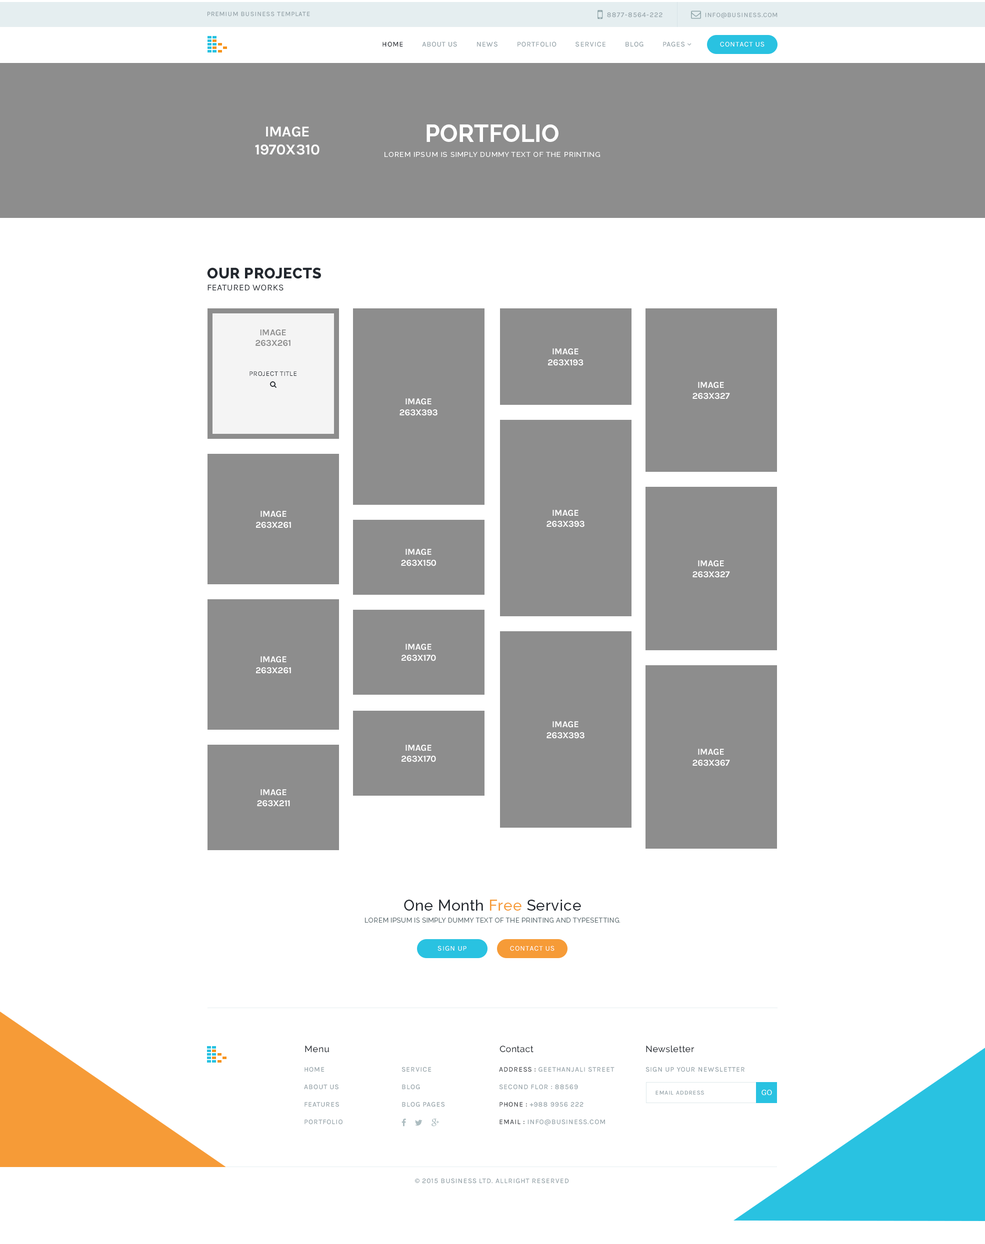
<style>
.page{position:relative;width:985px;height:1244px;background:#ffffff}
.page>*{position:absolute;margin:0}
.t1{font:6.5px "Karla-Regular";letter-spacing:0.075em;color:#93a1a7;text-transform:uppercase}
.t2{font:7px "Karla-Regular";letter-spacing:0.075em;color:#93a1a7;text-transform:uppercase}
.t3{font:7.2px "Karla-Regular";letter-spacing:0.075em;color:#93a1a7;text-transform:uppercase}
.t4{font:7.2px "Karla-Regular";letter-spacing:0.075em;color:#23282f;text-transform:uppercase}
.t5{font:7.2px "Karla-Regular";letter-spacing:0.075em;color:#ffffff;text-transform:uppercase}
.t6{font:7px/15px "Raleway-Regular";letter-spacing:0.075em;color:#ffffff;text-transform:uppercase}
.t7{font:24px/15px "Raleway-Bold";color:#ffffff;text-transform:uppercase}
.t8{font:15px "Karla-Bold";letter-spacing:-0.01em;color:#ffffff;text-transform:uppercase}
.t9{font:9px/12px "Karla-Regular";letter-spacing:0.025em;color:#23282f;text-transform:uppercase}
.t10{font:15px/12px "Raleway-ExtraBold";letter-spacing:0.025em;color:#23282f;text-transform:uppercase}
.t11{font:9px "Karla-Bold";letter-spacing:-0.01em;color:#8d8d8d;text-transform:uppercase}
.t12{font:9px "Karla-Bold";letter-spacing:-0.01em;color:#ffffff;text-transform:uppercase}
.t13{font:7px "Karla-Regular";letter-spacing:0.025em;color:#23282f;text-transform:uppercase}
.t14{font:6.5px/12px "Raleway-Regular";letter-spacing:0.05em;color:#59686c;text-transform:uppercase}
.t15{font:15px/12px "Raleway-Medium";letter-spacing:0.025em;color:#23282f}
.t16{font:15px/12px "Raleway-Medium";letter-spacing:0.025em;color:#f69b37}
.t17{font:9px "Raleway-Medium";letter-spacing:0.025em;color:#23282f}
.t18{font:7px/17.5px "Karla-Regular";letter-spacing:0.075em;color:#93a1a7;text-transform:uppercase}
.t19{font:7px/17.5px "Karla-Regular";letter-spacing:0.075em;color:#3e4146;text-transform:uppercase}
.t20{font:6px "Karla-Regular";letter-spacing:0.075em;color:#93a1a7;text-transform:uppercase}
.t21{font:7.5px "RobotoSlab-Regular";letter-spacing:0.025em;color:#ffffff}
.t22{font:7px "MyriadPro-Regular";letter-spacing:0.075em;color:#93a1a7;text-transform:uppercase}
</style>
<div class="page">
<p class="t1" style="left:207px;top:12px;width:103px;height:4px">premium business template</p>
<p class="t2" style="left:607px;top:12px;width:55px;height:6px">8877-8564-222</p>
<p class="t1" style="left:705px;top:12px;width:73px;height:6px">info@business.com</p>
<p class="t3" style="left:382px;top:42px;width:303px;height:5px"><span class="t4">Home         </span>About Us         News         Portfolio         Service         Blog         Pages</p>
<p class="t5" style="left:720px;top:42px;width:44px;height:5px">Contact Us</p>
<p class="t6" style="left:384px;top:124px;width:216px;height:33px;text-align:center"><span class="t7">Portfolio<br></span>Lorem Ipsum is simply dummy text of the printing</p>
<p class="t8" style="left:255px;top:126px;width:65px;height:29px;text-align:center">Image<br>1970x310</p>
<p class="t9" style="left:207px;top:268px;width:114px;height:23px"><span class="t10">Our Projects<br></span>featured works</p>
<p class="t11" style="left:256px;top:330px;width:34px;height:16px;text-align:center">Image<br>263X261</p>
<p class="t12" style="left:548px;top:348px;width:36px;height:18px;text-align:center">Image<br>263X193</p>
<p class="t13" style="left:250px;top:372px;width:46px;height:4px">Project title</p>
<p class="t12" style="left:692px;top:382px;width:38px;height:18px;text-align:center">Image<br>263X327</p>
<p class="t12" style="left:400px;top:398px;width:38px;height:18px;text-align:center">Image<br>263X393</p>
<p class="t12" style="left:546px;top:510px;width:38px;height:18px;text-align:center">Image<br>263X393</p>
<p class="t12" style="left:256px;top:511px;width:35px;height:17px;text-align:center">Image<br>263X261</p>
<p class="t12" style="left:401px;top:549px;width:35px;height:17px;text-align:center">Image<br>263X150</p>
<p class="t12" style="left:692px;top:560px;width:38px;height:18px;text-align:center">Image<br>263X327</p>
<p class="t12" style="left:402px;top:644px;width:34px;height:18px;text-align:center">Image<br>263X170</p>
<p class="t12" style="left:256px;top:656px;width:35px;height:18px;text-align:center">Image<br>263X261</p>
<p class="t12" style="left:546px;top:722px;width:38px;height:17px;text-align:center">Image<br>263X393</p>
<p class="t12" style="left:402px;top:745px;width:34px;height:17px;text-align:center">Image<br>263X170</p>
<p class="t12" style="left:692px;top:749px;width:38px;height:17px;text-align:center">Image<br>263X367</p>
<p class="t12" style="left:257px;top:790px;width:33px;height:17px;text-align:center">Image<br>263X211</p>
<p class="t14" style="left:365px;top:900px;width:255px;height:23px;text-align:center"><span class="t15">One Month </span><span class="t16">Free</span><span class="t15"> Service<br></span>Lorem Ipsum is simply dummy text of the printing and typesetting.</p>
<p class="t5" style="left:438px;top:946px;width:28px;height:6px">Sign up</p>
<p class="t5" style="left:510px;top:946px;width:44px;height:6px">Contact us</p>
<p class="t17" style="left:305px;top:1046px;width:24px;height:7px">Menu</p>
<p class="t17" style="left:500px;top:1046px;width:34px;height:7px">Contact</p>
<p class="t17" style="left:646px;top:1046px;width:48px;height:7px">Newsletter</p>
<p class="t18" style="left:304px;top:1067px;width:38px;height:58px">Home<br>About Us<br>Features<br>Portfolio</p>
<p class="t18" style="left:402px;top:1067px;width:43px;height:41px">Service<br>Blog<br>Blog Pages</p>
<p class="t18" style="left:499px;top:1067px;width:115px;height:59px"><span class="t19">Address : </span>Geethanjali street<br>Second flor : 88569<br><span class="t19">Phone :</span> +988 9956 222<br><span class="t19">Email :</span> info@business.com</p>
<p class="t2" style="left:646px;top:1067px;width:98px;height:5px">Sign up your newsletter</p>
<p class="t20" style="left:656px;top:1091px;width:48px;height:5px">Email Address</p>
<p class="t21" style="left:762px;top:1090px;width:10px;height:6px">GO</p>
<p class="t2" style="left:415px;top:1178px;width:154px;height:6px"><span class="t22">©</span> 2015 business Ltd. allright reserved</p>
</div>
